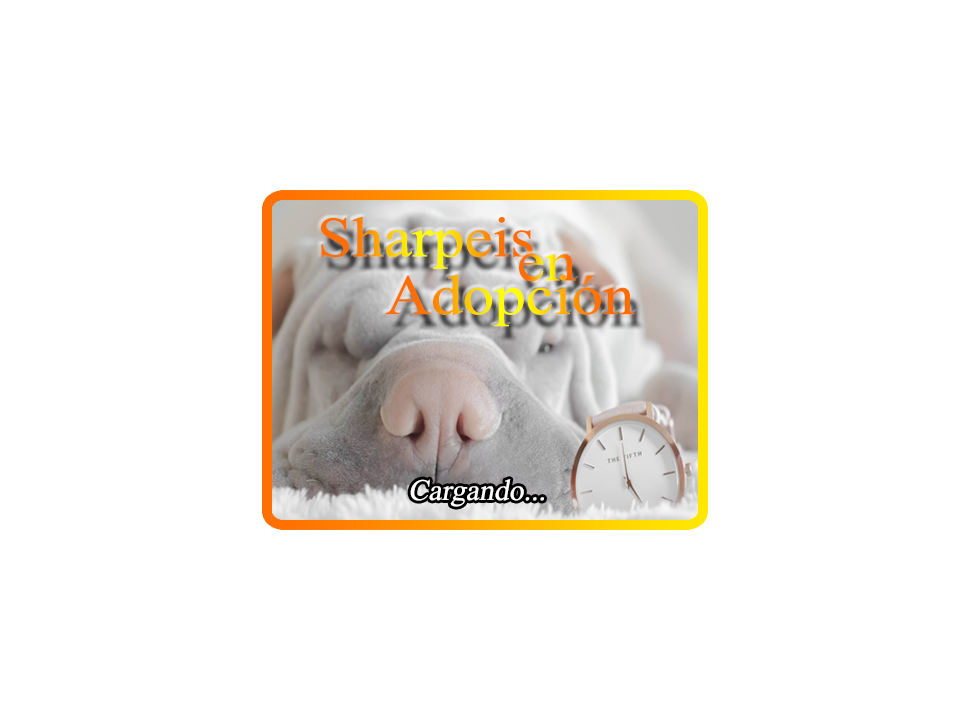
<style>
.page{position:relative;width:970px;height:720px;background:#ffffff}
.page>*{position:absolute;margin:0}
.t1{font:68.6px "ShonarBangla";scale:1.11 1}
.t2{font:36px "ShonarBangla";color:#ffffff;font-style:italic}
</style>
<div class="page">
<p class="t1" style="left:321px;top:217px;width:212px;height:52px">Sharpeis</p>
<p class="t1" style="left:519px;top:254px;width:58px;height:28px">en</p>
<p class="t1" style="left:385px;top:274px;width:250px;height:53px">Adopción</p>
<p class="t2" style="left:410px;top:479px;width:134px;height:28px">Cargando...</p>
</div>
